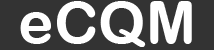
<style>
.page{position:relative;width:214px;height:50px;background:#333333}
.page>*{position:absolute;margin:0}
.t1{font:60px "ArialRoundedMTBold";color:#ffffff}
</style>
<div class="page">
<p class="t1" style="left:20px;top:1px;width:172px;height:46px">eCQM</p>
</div>
